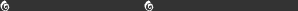
<style>
.page{position:relative;width:298px;height:11px;background:#333333}
.page>*{position:absolute;margin:0}
.t1{font:28px "Gigi-Regular";color:#ffffff}
</style>
<div class="page">
<p class="t1" style="left:0px;top:0px;width:154px;height:11px">o    o</p>
</div>
